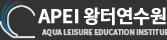
<style>
.page{position:relative;width:167px;height:40px;background:#333333}
.page>*{position:absolute;margin:0}
.t1{font:18.9px "NotoSansCJKkr-Bold";letter-spacing:-0.04em;color:#fefefe;font-weight:bold}
.t2{font:7px "NotoSansCJKkr-Bold";letter-spacing:-0.03em;color:#cccccc;font-weight:bold}
</style>
<div class="page">
<p class="t1" style="left:38px;top:7px;width:128px;height:19px">APEI 왕터연수원</p>
<p class="t2" style="left:42px;top:29px;width:127px;height:8px">AQUA LEISURE EDUCATION INSTITUE</p>
</div>
